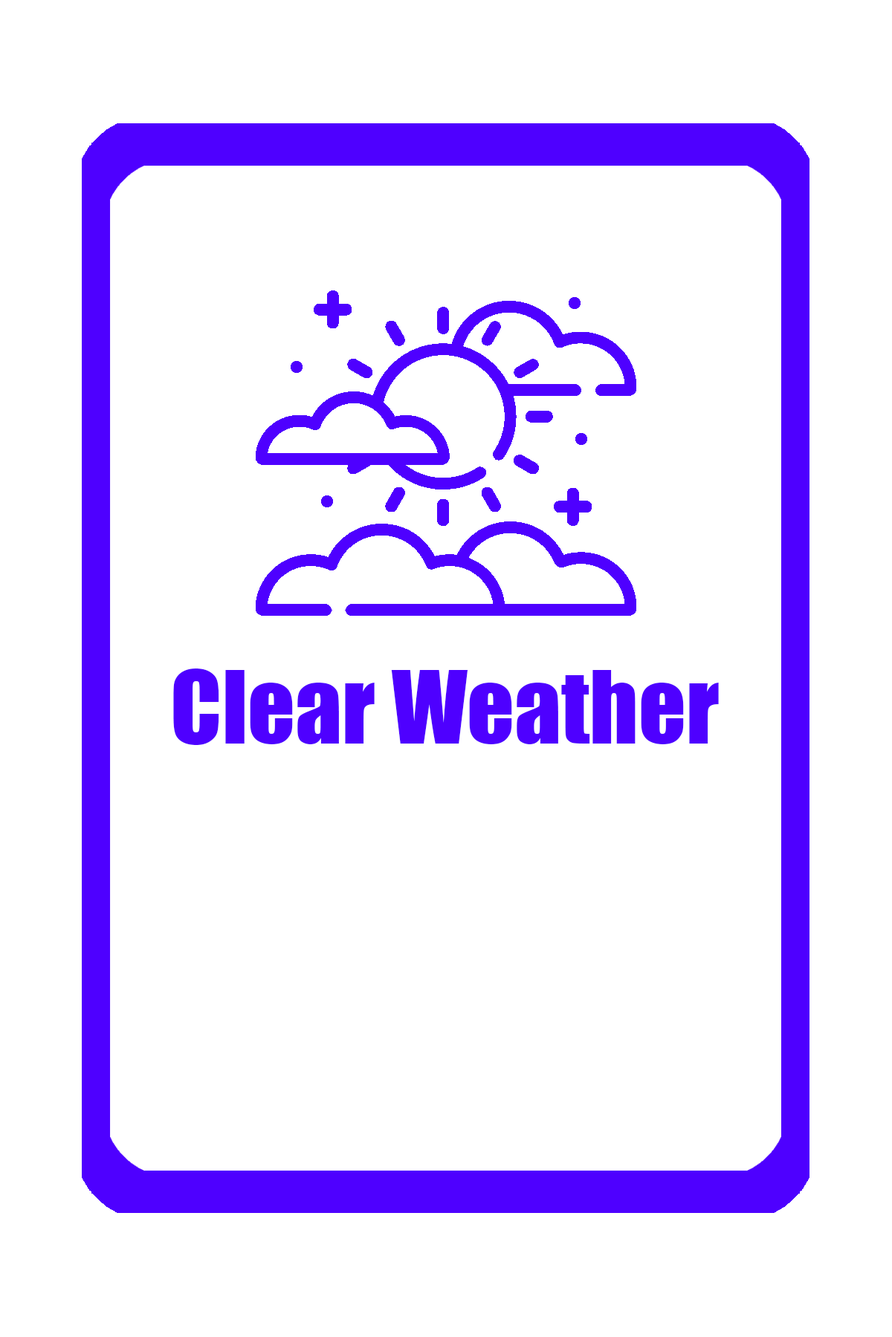
<style>
.page{position:relative;width:892px;height:1337px;background:#ffffff}
.page>*{position:absolute;margin:0}
.t1{font:92.9px "Impact";color:#4e00ff}
</style>
<div class="page">
<p class="t1" style="left:173px;top:669px;width:545px;height:76px">Clear Weather</p>
</div>
